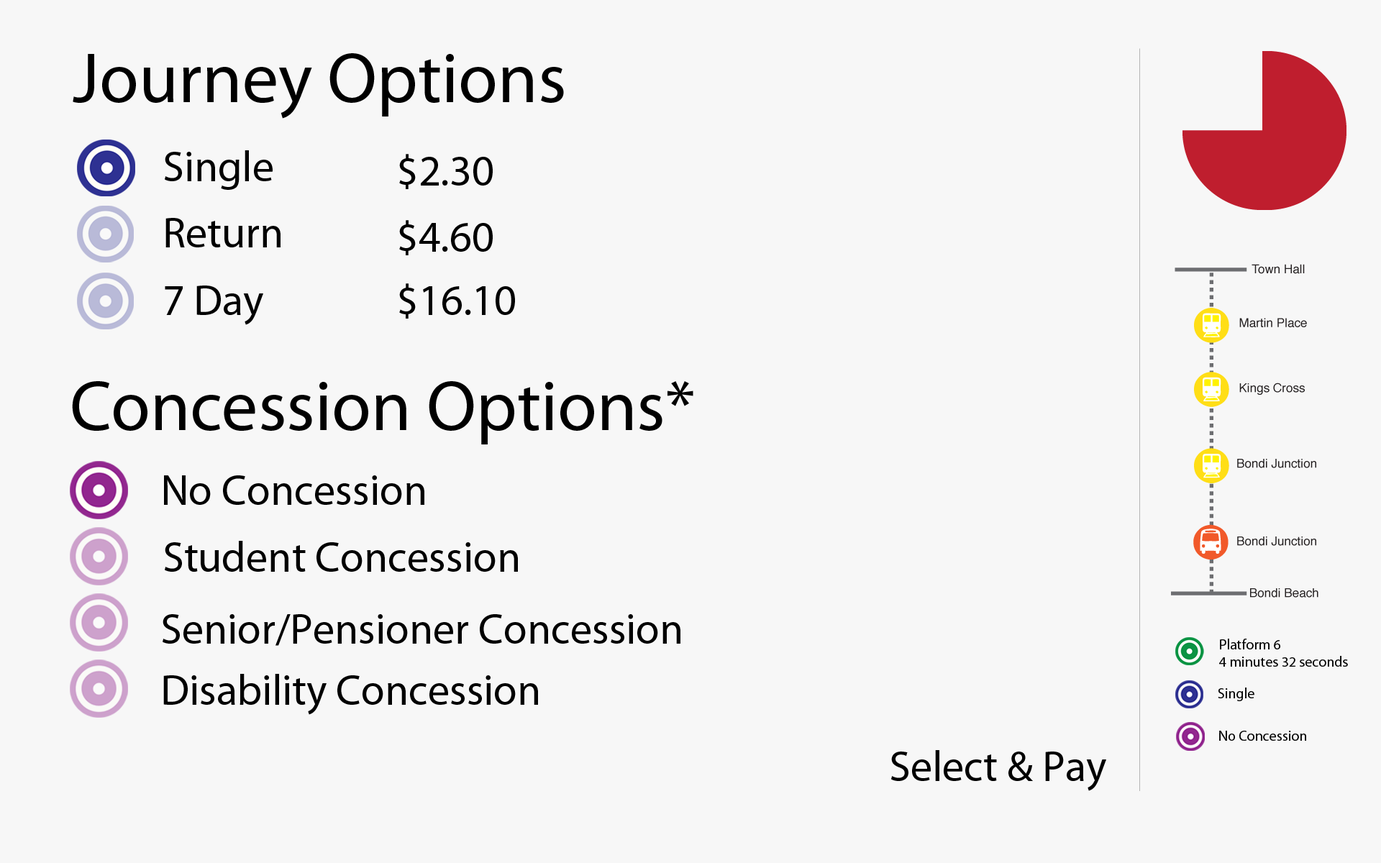
<style>
.page{position:relative;width:1381px;height:863px;background:#f7f7f7}
.page>*{position:absolute;margin:0}
.t1{font:71.9px "MyriadPro-Regular";color:#000000}
.t2{font:43.2px "MyriadPro-Regular";color:#000000}
.t3{font:14.4px "MyriadPro-Regular";color:#000000}
</style>
<div class="page">
<p class="t1" style="left:73px;top:53px;width:491px;height:66px">Journey Options</p>
<p class="t2" style="left:165px;top:150px;width:108px;height:40px">Single</p>
<p class="t2" style="left:399px;top:154px;width:94px;height:35px">$2.30</p>
<p class="t2" style="left:165px;top:218px;width:116px;height:29px">Return</p>
<p class="t2" style="left:399px;top:220px;width:94px;height:35px">$4.60</p>
<p class="t2" style="left:165px;top:286px;width:98px;height:39px">7 Day</p>
<p class="t2" style="left:399px;top:283px;width:116px;height:36px">$16.10</p>
<p class="t1" style="left:72px;top:381px;width:622px;height:64px">Concession Options*</p>
<p class="t2" style="left:164px;top:476px;width:260px;height:29px">No Concession</p>
<p class="t2" style="left:165px;top:541px;width:353px;height:31px">Student Concession</p>
<p class="t2" style="left:163px;top:614px;width:518px;height:32px">Senior/Pensioner Concession</p>
<p class="t3" style="left:1219px;top:639px;width:129px;height:28px">Platform 6<br>4 minutes 32 seconds</p>
<p class="t2" style="left:163px;top:674px;width:375px;height:41px">Disability Concession</p>
<p class="t3" style="left:1218px;top:688px;width:37px;height:13px">Single</p>
<p class="t3" style="left:1219px;top:731px;width:87px;height:10px">No Concession</p>
<p class="t2" style="left:891px;top:750px;width:215px;height:41px">Select &amp; Pay</p>
</div>
